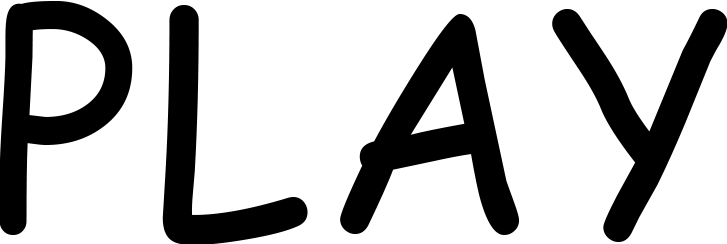
<style>
.page{position:relative;width:727px;height:244px;background:#ffffff}
.page>*{position:absolute;margin:0}
.t1{font:300px "ComicSansMS";letter-spacing:0.025em;color:#000000}
</style>
<div class="page">
<p class="t1" style="left:0px;top:1px;width:728px;height:244px">PLAY</p>
</div>
